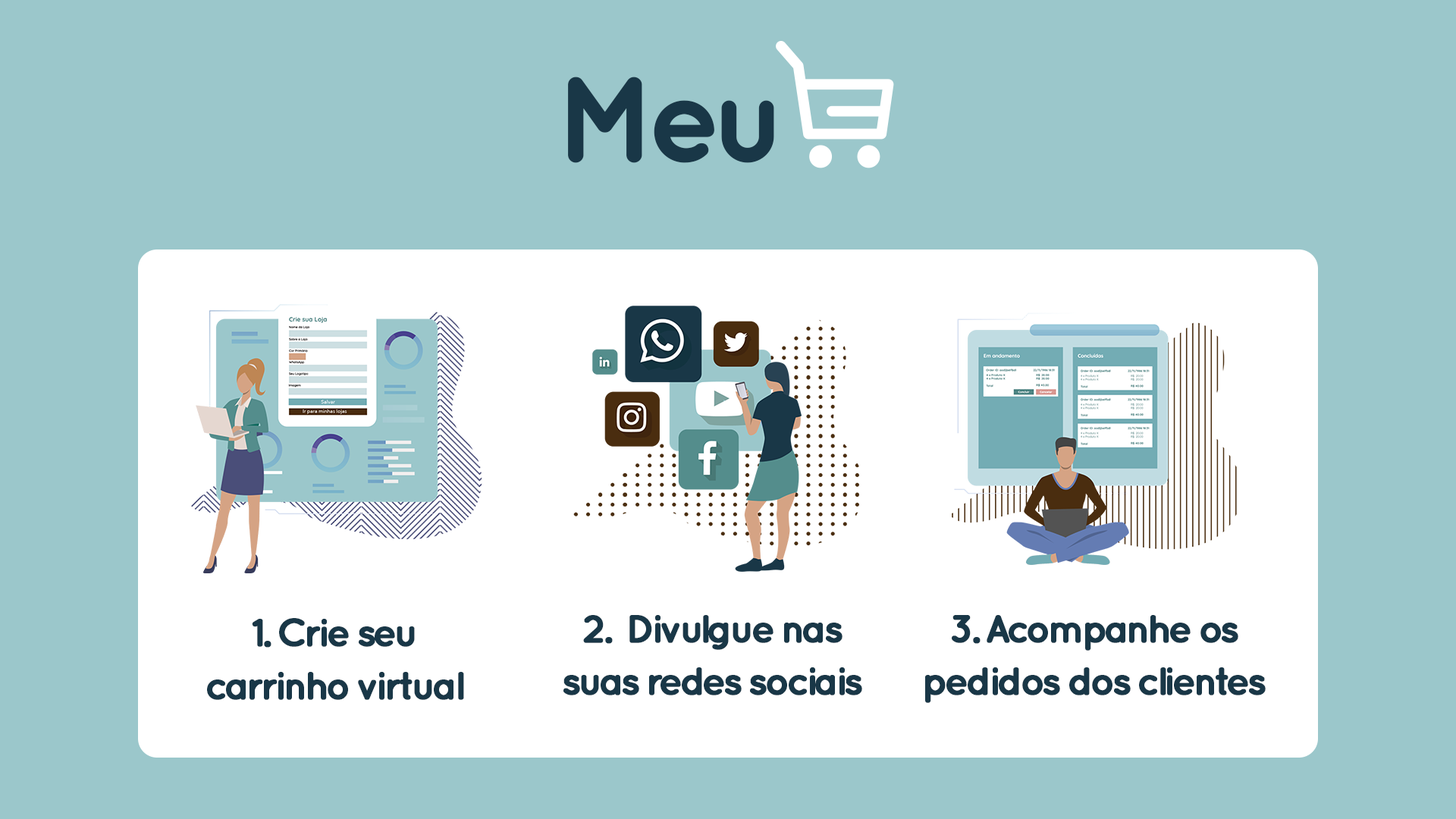
<style>
.page{position:relative;width:1456px;height:819px;background:#9bc7cb}
.page>*{position:absolute;margin:0}
.t1{font:119.3px "QuicksandBold-Regular";letter-spacing:-0.1em;color:#193747;font-weight:bold}
.t2{font:39.3px/52.7px "QuicksandBold-Regular";letter-spacing:-0.1em;color:#193747;font-weight:bold}
</style>
<div class="page">
<p class="t1" style="left:568px;top:77px;width:206px;height:86px">Meu</p>
<p class="t2" style="left:563px;top:615px;width:299px;height:80px;text-align:center">2.  Divulgue nas<br>suas redes sociais</p>
<p class="t2" style="left:925px;top:615px;width:341px;height:88px;text-align:center">3. Acompanhe os<br>pedidos dos clientes</p>
<p class="t2" style="left:207px;top:618px;width:257px;height:82px;text-align:center">1. Crie seu<br>carrinho virtual</p>
</div>
